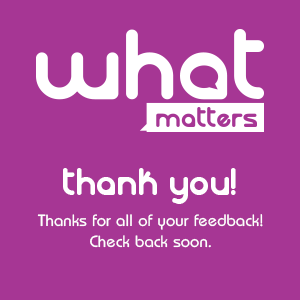
<style>
.page{position:relative;width:300px;height:300px;background:#a63694}
.page>*{position:absolute;margin:0}
.t1{font:36px "Laloted";color:#ffffff}
.t2{font:17px "Opal";color:#ffffff}
</style>
<div class="page">
<p class="t1" style="left:63px;top:168px;width:173px;height:36px">thank you!</p>
<p class="t2" style="left:37px;top:214px;width:226px;height:34px;text-align:center">Thanks for all of your feedback!<br>Check back soon.</p>
</div>
